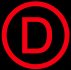
<style>
.page{position:relative;width:71px;height:70px;background:#000000}
.page>*{position:absolute;margin:0}
.t1{font:50px "ArialMT";letter-spacing:0.1em;color:#f80013}
</style>
<div class="page">
<p class="t1" style="left:22px;top:17px;width:30px;height:37px">D</p>
</div>
